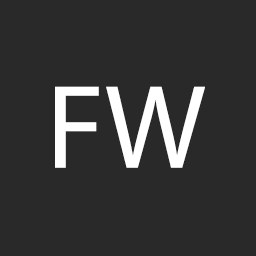
<style>
.page{position:relative;width:256px;height:256px;background:#292929}
.page>*{position:absolute;margin:0}
.t1{font:120px "MyriadPro-Regular";color:#ffffff}
</style>
<div class="page">
<p class="t1" style="left:55px;top:86px;width:150px;height:82px">FW</p>
</div>
